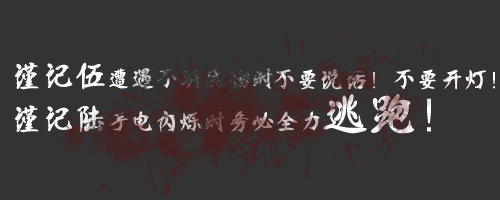
<style>
.page{position:relative;width:500px;height:200px;background:#333333}
.page>*{position:absolute;margin:0}
.t1{font:24px "HDZK--HSJHDTJ-01"}
.t2{font:32px "HDZK--HSJHDTJ-01"}
.t3{font:48px "HDZK--HSJHDTJ-01"}
</style>
<div class="page">
<p class="t1" style="left:14px;top:62px;width:259px;height:28px"><span class="t2">谨记伍</span>遭遇不明生物时</p>
<p class="t1" style="left:274px;top:69px;width:221px;height:21px">不要说话！不要开灯！</p>
<p class="t3" style="left:323px;top:94px;width:108px;height:40px">逃跑！</p>
<p class="t1" style="left:14px;top:105px;width:306px;height:28px"><span class="t2">谨记陆</span>手电闪烁时务必全力</p>
</div>
